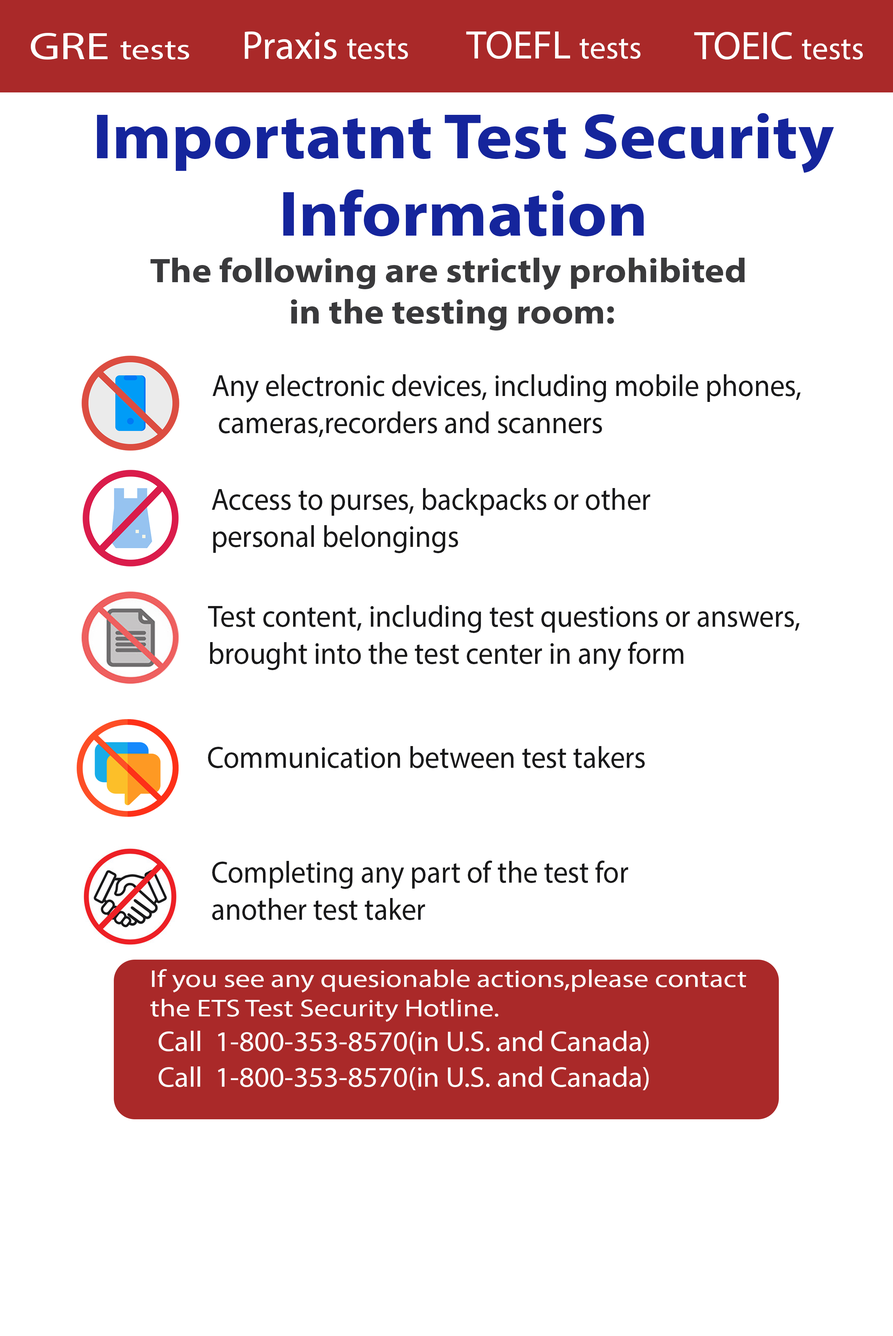
<style>
.page{position:relative;width:893px;height:1336px;background:#ffffff}
.page>*{position:absolute;margin:0}
.t1{font:29.2px "MyriadPro-Regular";color:#ffffff;scale:1.25 1}
.t2{font:38.3px "MyriadPro-Regular";color:#ffffff;scale:1.25 1}
.t3{font:40px "MyriadPro-Regular";color:#ffffff}
.t4{font:32.1px "MyriadPro-Regular";color:#ffffff}
.t5{font:64.3px "MyriadPro-Bold";color:#15259c;scale:1.07 1}
.t6{font:34.4px "MyriadPro-Bold";color:#3a3a3c;scale:1.08 1}
.t7{font:30.8px "MyriadPro-Regular";color:#19191a;scale:0.94 1}
.t8{font:24.6px "MyriadPro-Regular";color:#fcfcfc;scale:1.19 1}
.t9{font:28.4px "MyriadPro-Regular";color:#fcfcfc;scale:1.04 1}
</style>
<div class="page">
<p class="t1" style="left:31px;top:33px;width:158px;height:27px"><span class="t2"> GRE </span>tests</p>
<p class="t3" style="left:245px;top:31px;width:163px;height:29px">Praxis <span class="t4">tests</span></p>
<p class="t3" style="left:466px;top:31px;width:174px;height:28px">TOEFL <span class="t4">tests</span></p>
<p class="t3" style="left:694px;top:32px;width:169px;height:28px">TOEIC <span class="t4">tests</span></p>
<p class="t5" style="left:97px;top:113px;width:737px;height:124px;text-align:center">Importatnt Test Security<br>Information</p>
<p class="t6" style="left:150px;top:257px;width:595px;height:74px;text-align:center">The following are strictly prohibited <br>in the testing room:</p>
<p class="t7" style="left:212px;top:374px;width:588px;height:63px">Any electronic devices, including mobile phones,<br> cameras,recorders and scanners</p>
<p class="t7" style="left:212px;top:488px;width:438px;height:65px">Access to purses, backpacks or other <br>personal belongings</p>
<p class="t7" style="left:208px;top:605px;width:591px;height:65px">Test content, including test questions or answers,<br>brought into the test center in any form</p>
<p class="t7" style="left:208px;top:746px;width:436px;height:22px">Communication between test takers</p>
<p class="t7" style="left:212px;top:860px;width:416px;height:60px">Completing any part of the test for <br>another test taker</p>
<p class="t8" style="left:150px;top:969px;width:596px;height:53px">If you see any quesionable actions,please contact<br>the ETS Test Security Hotline.</p>
<p class="t9" style="left:159px;top:1031px;width:490px;height:23px">Call  1-800-353-8570(in U.S. and Canada)</p>
<p class="t9" style="left:159px;top:1066px;width:490px;height:24px">Call  1-800-353-8570(in U.S. and Canada)</p>
</div>
